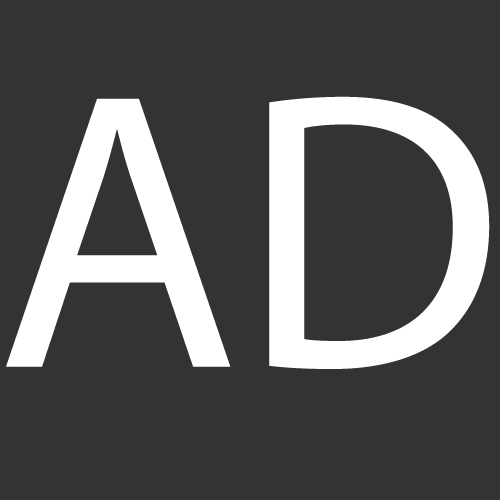
<style>
.page{position:relative;width:500px;height:500px;background:#333333}
.page>*{position:absolute;margin:0}
.t1{font:397.1px "MyriadPro-Regular";color:#ffffff}
</style>
<div class="page">
<p class="t1" style="left:6px;top:96px;width:484px;height:273px">AD</p>
</div>
